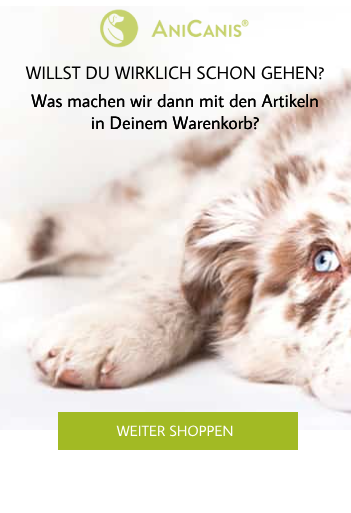
<style>
.page{position:relative;width:351px;height:513px}
.page>*{position:absolute;margin:0}
.t1{font:18px "AverageSans-Regular";color:#000000}
.t2{font:15px "AverageSans-Regular";color:#ffffff}
</style>
<div class="page">
<p class="t1" style="left:25px;top:66px;width:299px;height:14px">WILLST DU WIRKLICH SCHON GEHEN?</p>
<p class="t1" style="left:31px;top:94px;width:287px;height:36px;text-align:center">Was machen wir dann mit den Artikeln<br>in Deinem Warenkorb?</p>
<p class="t1" style="left:31px;top:94px;width:287px;height:36px;text-align:center">Was machen wir dann mit den Artikeln<br>in Deinem Warenkorb?</p>
<p class="t2" style="left:116px;top:425px;width:117px;height:12px">WEITER SHOPPEN</p>
</div>
